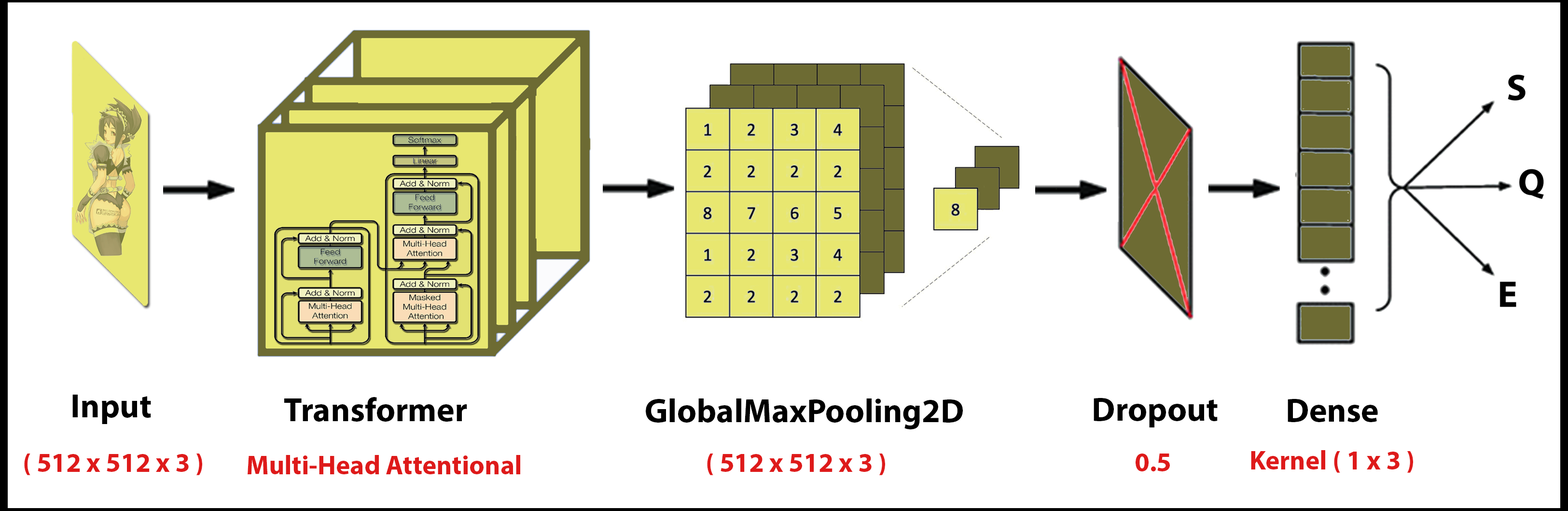
<style>
.page{position:relative;width:1568px;height:511px;background:#ffffff}
.page>*{position:absolute;margin:0}
.t1{font:33.5px "MyriadPro-Bold";color:#000000}
.t2{font:26.8px "MyriadPro-Bold";color:#de1a1a}
</style>
<div class="page">
<p class="t1" style="left:72px;top:394px;width:79px;height:30px">Input</p>
<p class="t1" style="left:284px;top:397px;width:183px;height:24px">Transformer</p>
<p class="t1" style="left:646px;top:398px;width:317px;height:31px">GlobalMaxPooling2D</p>
<p class="t1" style="left:1094px;top:398px;width:124px;height:29px">Dropout</p>
<p class="t1" style="left:1288px;top:399px;width:90px;height:23px">Dense</p>
<p class="t2" style="left:1251px;top:450px;width:162px;height:22px">( 3 x 1 ) Kernel</p>
<p class="t2" style="left:24px;top:453px;width:178px;height:22px">( 3 x 512 x 512 )</p>
<p class="t2" style="left:248px;top:455px;width:272px;height:19px">Multi-Head Attentional</p>
<p class="t2" style="left:707px;top:453px;width:178px;height:22px">( 3 x 512 x 512 )</p>
<p class="t2" style="left:1136px;top:453px;width:34px;height:18px">0.5</p>
</div>
